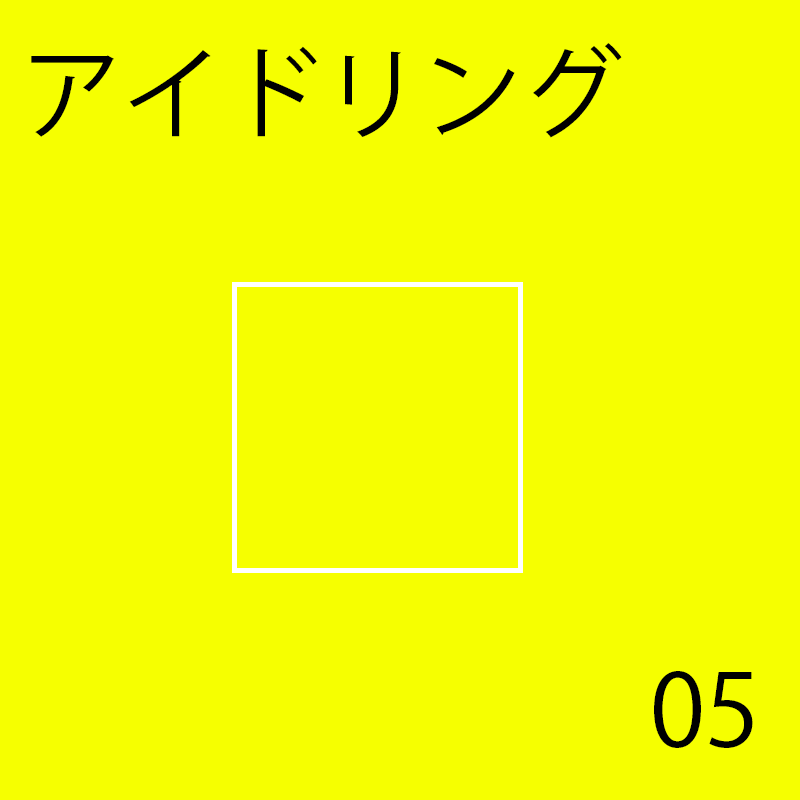
<style>
.page{position:relative;width:800px;height:800px;background:#f6ff00}
.page>*{position:absolute;margin:0}
.t1{font:100px "KozGoPr6N-Regular";color:#000000}
</style>
<div class="page">
<p class="t1" style="left:31px;top:43px;width:591px;height:95px">アイドリング</p>
<p class="t1" style="left:31px;top:43px;width:591px;height:95px">アイドリング</p>
<p class="t1" style="left:31px;top:43px;width:591px;height:95px">アイドリング</p>
<p class="t1" style="left:31px;top:43px;width:591px;height:95px">アイドリング</p>
<p class="t1" style="left:31px;top:43px;width:591px;height:95px">アイドリング</p>
<p class="t1" style="left:31px;top:43px;width:591px;height:95px">アイドリング</p>
<p class="t1" style="left:654px;top:671px;width:102px;height:77px">00</p>
<p class="t1" style="left:654px;top:671px;width:85px;height:77px">01</p>
<p class="t1" style="left:654px;top:671px;width:101px;height:77px">02</p>
<p class="t1" style="left:654px;top:671px;width:99px;height:77px">03</p>
<p class="t1" style="left:654px;top:671px;width:105px;height:77px">04</p>
<p class="t1" style="left:654px;top:671px;width:99px;height:77px">05</p>
</div>
